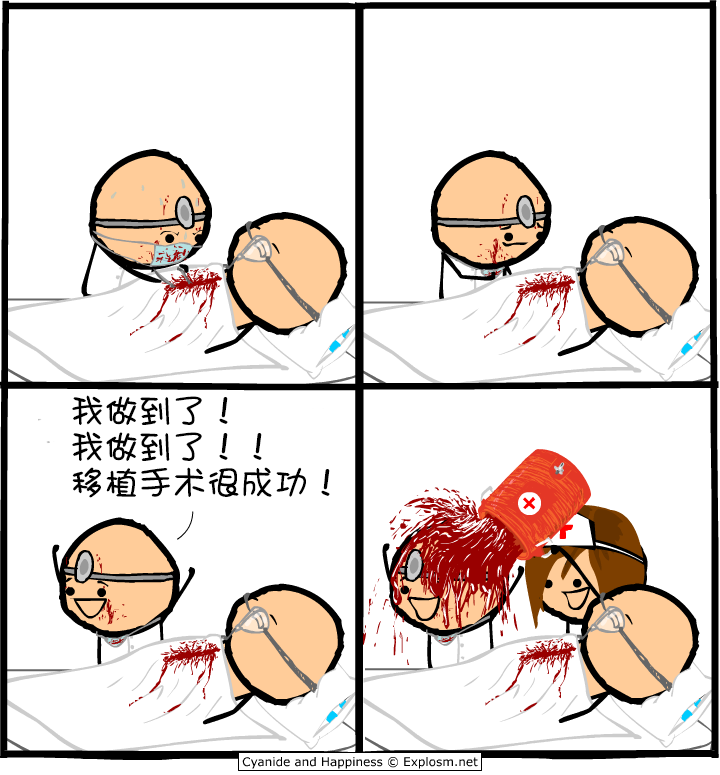
<style>
.page{position:relative;width:720px;height:775px;background:#ffffff}
.page>*{position:absolute;margin:0}
.t1{font:34px/36px "DFPShaoNvW5";color:#000000}
</style>
<div class="page">
<p class="t1" style="left:72px;top:395px;width:258px;height:103px">我做到了！<br>我做到了！！<br>移植手术很成功！</p>
</div>
